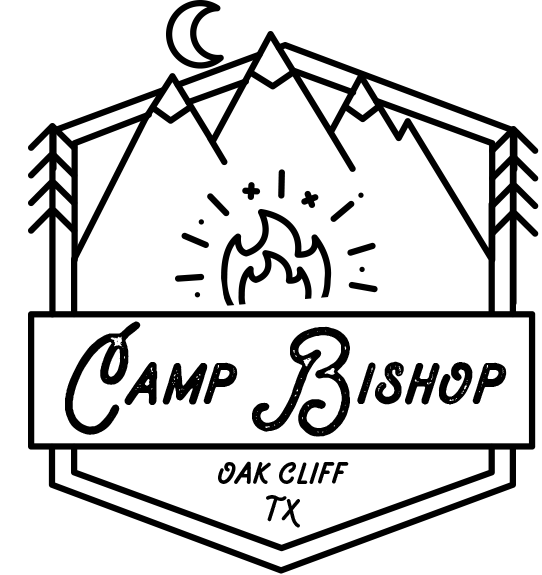
<style>
.page{position:relative;width:542px;height:575px;background:#ffffff}
.page>*{position:absolute;margin:0}
.t1{font:79.2px "FORESTCAMPSTAMP";letter-spacing:0.02em;color:#000000}
.t2{font:41.7px/37.5px "FORESTCAMPEDGE";letter-spacing:0.02em;color:#000000}
</style>
<div class="page">
<p class="t1" style="left:65px;top:321px;width:442px;height:116px">Camp Bishop</p>
<p class="t2" style="left:218px;top:461px;width:131px;height:67px;text-align:center">oak cliff<br>tx</p>
</div>
